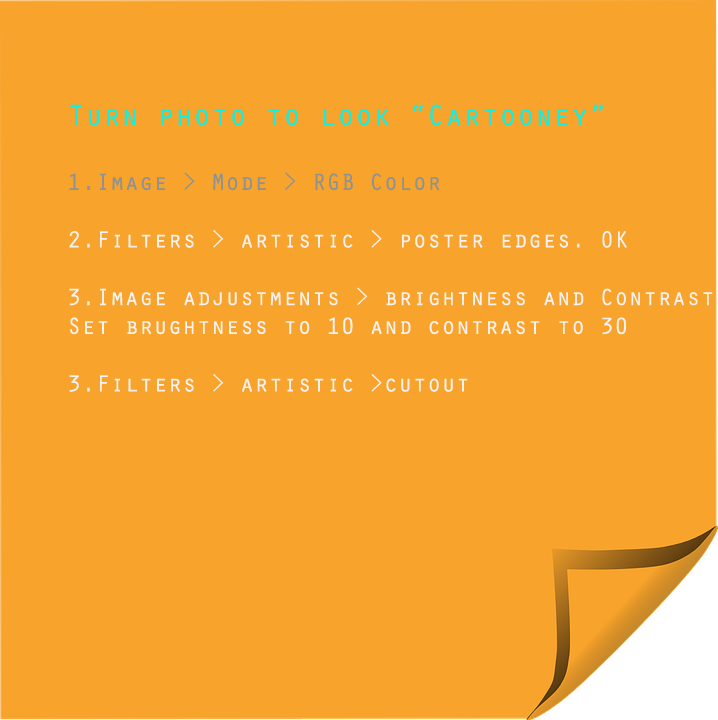
<style>
.page{position:relative;width:718px;height:720px;background:#f8a32b}
.page>*{position:absolute;margin:0}
.t1{font:24px "OratorStd";color:#f7f1f1}
.t2{font:30px "OratorStd";color:#12efe2}
.t3{font:24px "OratorStd";color:#8e9293}
</style>
<div class="page">
<p class="t1" style="left:69px;top:104px;width:644px;height:288px"><span class="t2">Turn photo to look “Cartooney”<br><br></span><span class="t3">1.Image &gt; Mode &gt; RGB Color<br></span><br>2.Filters &gt; artistic &gt; poster edges. OK<br><br>3.Image adjustments &gt; brightness and Contrast<br>Set brughtness to 10 and contrast to 30<br><br>3.Filters &gt; artistic &gt;cutout</p>
</div>
